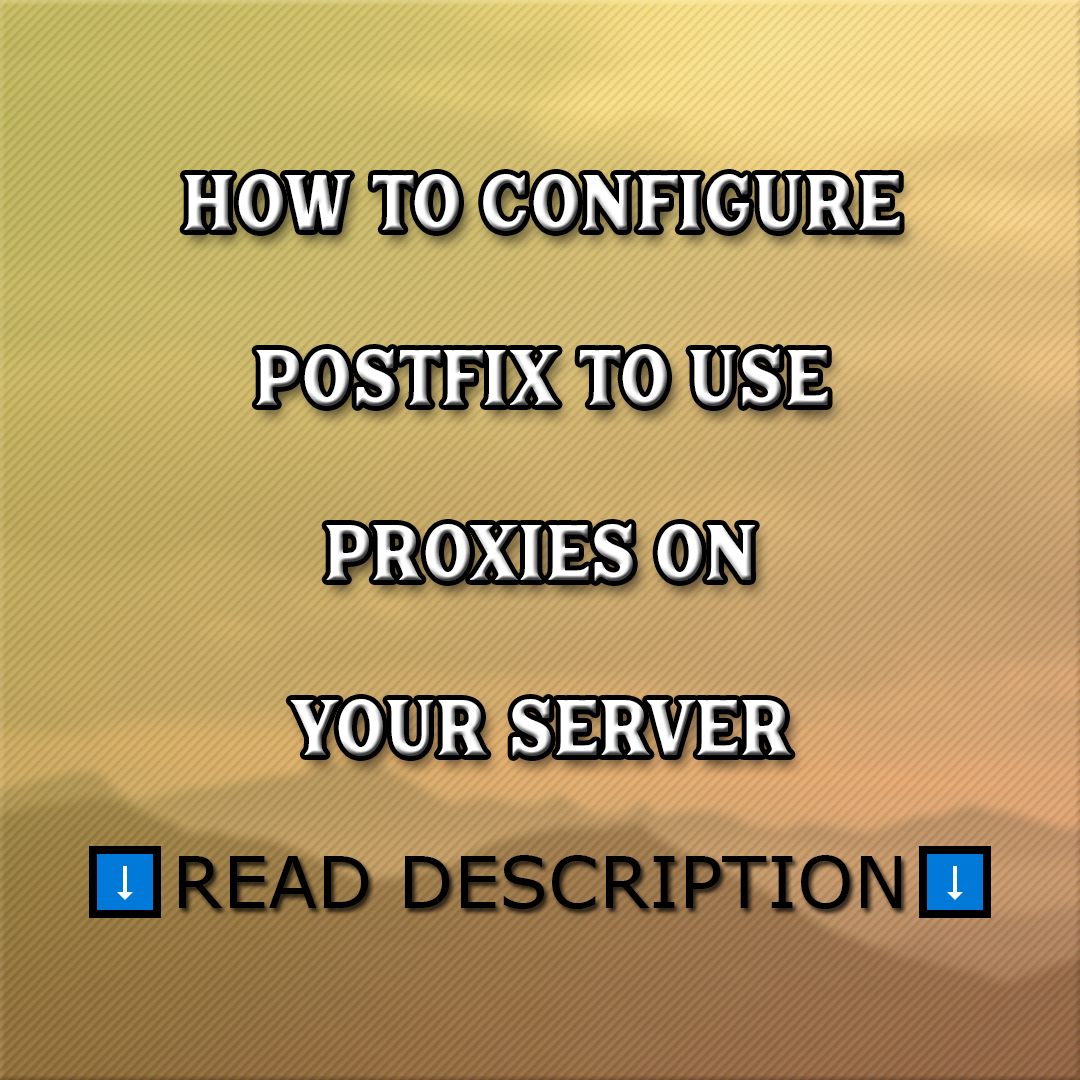
<style>
.page{position:relative;width:1080px;height:1080px}
.page>*{position:absolute;margin:0}
.t1{font:85px/175px "HanleyPro-Block"}
.t2{font:72px "Verdana";color:#000000}
</style>
<div class="page">
<p class="t1" style="left:184px;top:174px;width:716px;height:582px;text-align:center">how to configure<br>postfix to use<br>proxies on<br>your server</p>
<p class="t2" style="left:179px;top:855px;width:722px;height:54px">READ DESCRIPTION</p>
</div>
